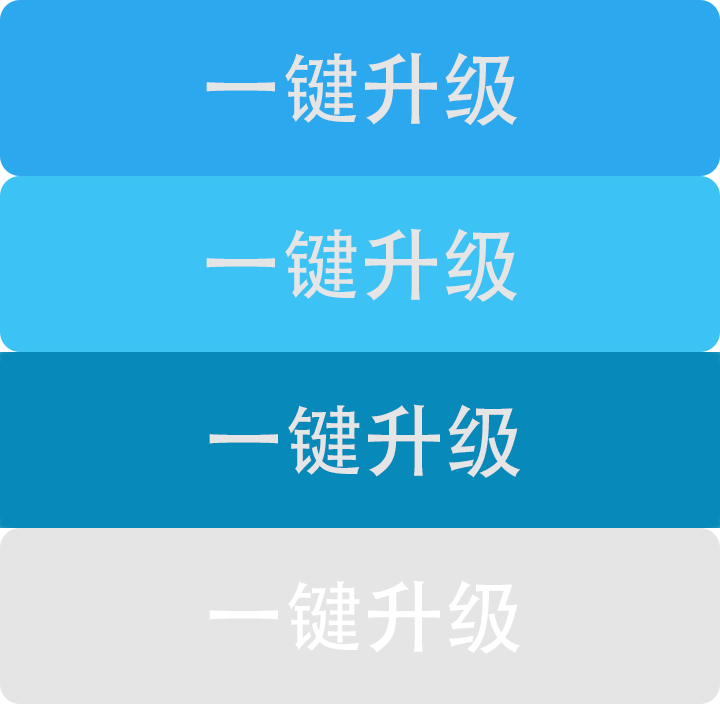
<style>
.page{position:relative;width:720px;height:704px;background:#e5e5e5}
.page>*{position:absolute;margin:0}
.t1{font:80px "AdobeHeitiStd-Regular";color:#e5e5e5}
.t2{font:80px "AdobeHeitiStd-Regular";color:#ffffff}
</style>
<div class="page">
<p class="t1" style="left:206px;top:52px;width:311px;height:74px">一键升级</p>
<p class="t1" style="left:206px;top:228px;width:311px;height:74px">一键升级</p>
<p class="t1" style="left:209px;top:404px;width:311px;height:74px">一键升级</p>
<p class="t2" style="left:209px;top:580px;width:311px;height:74px">一键升级</p>
</div>
